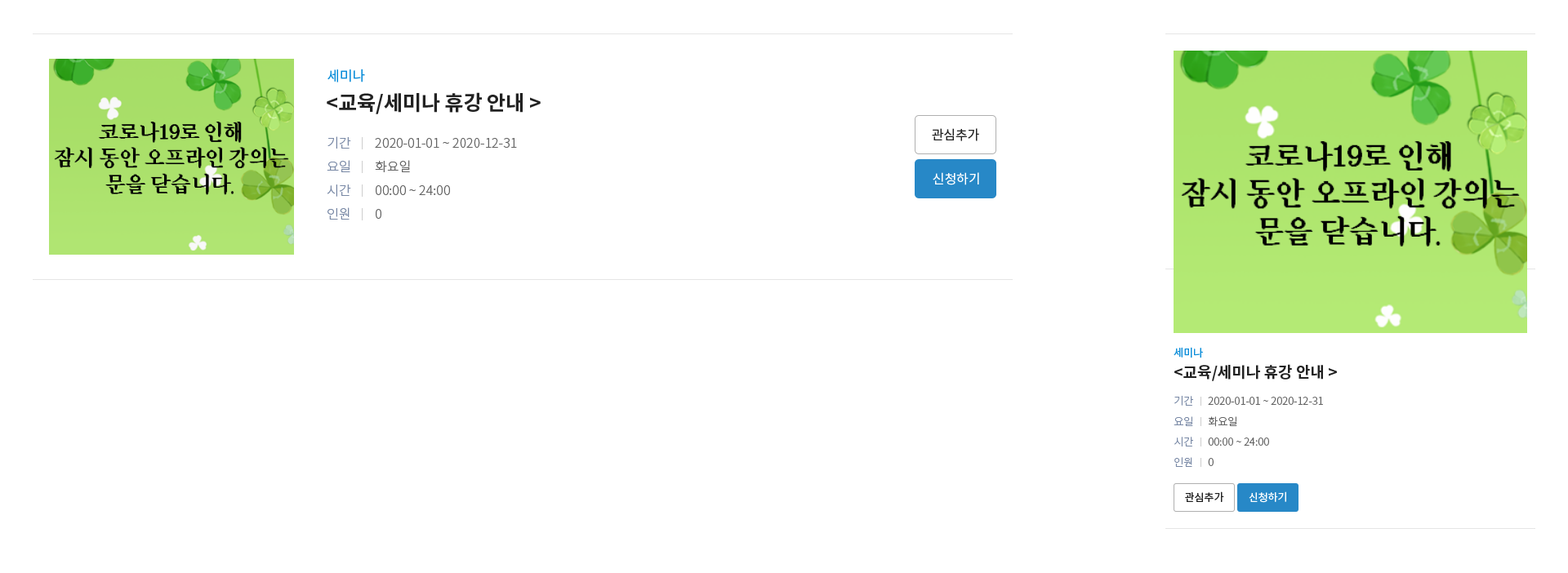
<style>
.page{position:relative;width:1568px;height:573px;background:#ffffff}
.page>*{position:absolute;margin:0}
.t1{font:13.9px "NotoSansKR-Regular";color:#0b8dd9}
.t2{font:20.4px "NotoSansKR-Bold";color:#222222}
.t3{font:13.1px/23.7px "NotoSansKR-Light";color:#7888a5}
.t4{font:13.1px "NotoSansKR-Regular";color:#222222}
.t5{font:13.1px/23.7px "NotoSansKR-Light";color:#646464}
.t6{font:13.1px "NotoSansKR-Regular";color:#ffffff}
.t7{font:10.6px "NotoSansKR-Regular";color:#0b8dd9}
.t8{font:15.5px "NotoSansKR-Bold";color:#222222}
.t9{font:10.6px/20.4px "NotoSansKR-Light";color:#7888a5}
.t10{font:10.6px/20.4px "NotoSansKR-Light";color:#646464}
.t11{font:10.6px "NotoSansKR-Regular";color:#222222}
.t12{font:10.6px "NotoSansKR-Regular";color:#ffffff}
</style>
<div class="page">
<p class="t1" style="left:327px;top:69px;width:38px;height:13px">세미나</p>
<p class="t2" style="left:327px;top:92px;width:214px;height:22px">&lt;교육/세미나 휴강 안내 &gt;</p>
<p class="t3" style="left:327px;top:136px;width:24px;height:84px;text-align:justify">기간<br>요일<br>시간<br>인원</p>
<p class="t4" style="left:932px;top:128px;width:47px;height:13px">관심추가</p>
<p class="t5" style="left:375px;top:138px;width:142px;height:81px;text-align:justify">2020-01-01 ~ 2020-12-31<br>화요일<br>00:00 ~ 24:00<br>0</p>
<p class="t6" style="left:933px;top:172px;width:46px;height:13px">신청하기</p>
<p class="t7" style="left:1174px;top:347px;width:29px;height:12px">세미나</p>
<p class="t8" style="left:1174px;top:364px;width:163px;height:17px">&lt;교육/세미나 휴강 안내 &gt;</p>
<p class="t9" style="left:1174px;top:395px;width:19px;height:72px;text-align:justify">기간<br>요일<br>시간<br>인원</p>
<p class="t10" style="left:1208px;top:397px;width:115px;height:69px;text-align:justify">2020-01-01 ~ 2020-12-31<br>화요일<br>00:00 ~ 24:00<br>0</p>
<p class="t11" style="left:1185px;top:492px;width:39px;height:10px">관심추가</p>
<p class="t12" style="left:1249px;top:492px;width:37px;height:11px">신청하기</p>
</div>
